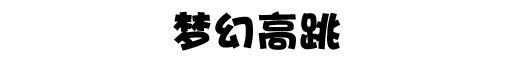
<style>
.page{position:relative;width:512px;height:62px;background:#ffffff}
.page>*{position:absolute;margin:0}
.t1{font:42.7px "DFPHaiBaoW12";color:#000000}
</style>
<div class="page">
<p class="t1" style="left:173px;top:11px;width:168px;height:40px">梦幻高跳</p>
</div>
